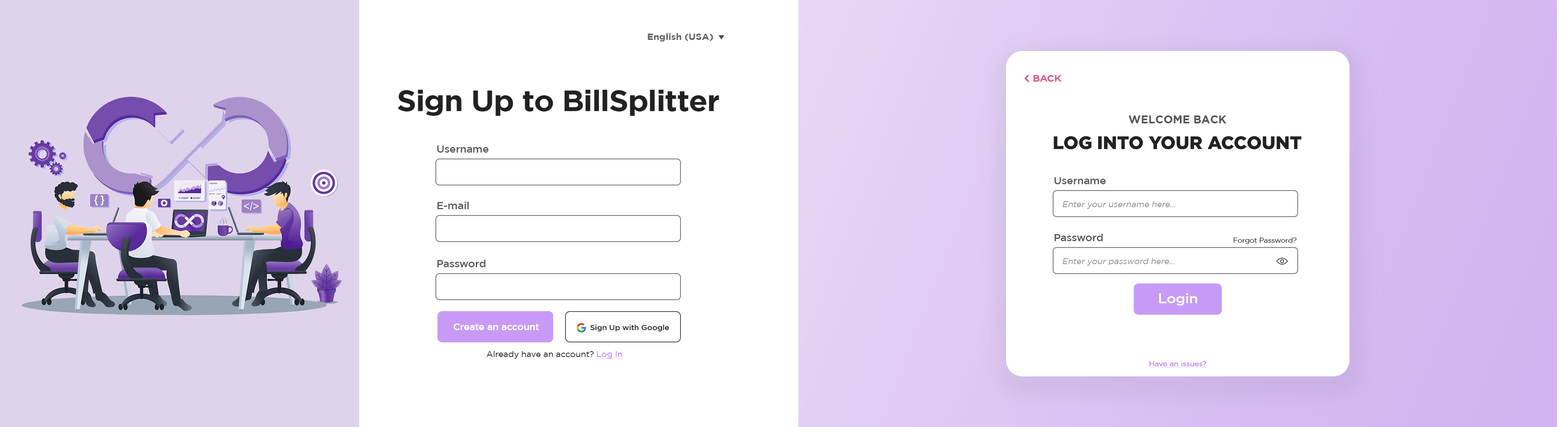
<style>
.page{position:relative;width:1568px;height:427px;background:#ffffff}
.page>*{position:absolute;margin:0}
.t1{font:9.1px "Gotham-Bold";letter-spacing:-0.01em;color:#656565;scale:1.05 1}
.t2{font:9.1px "Gotham-Bold";letter-spacing:-0.01em;color:#656565;text-transform:uppercase;scale:1.05 1}
.t3{font:9.2px "Gotham-Medium";letter-spacing:-0.025em;color:#d55c92;font-weight:bold;scale:1.05 1}
.t4{font:29.3px "Gotham-Bold";letter-spacing:-0.025em;color:#222222;scale:1.05 1}
.t5{font:11.1px "Gotham-Bold";color:#555555}
.t6{font:18.1px "Gotham-Black";color:#222222}
.t7{font:10.3px "Gotham-Medium";letter-spacing:-0.025em;color:#585858;scale:1.05 1}
.t8{font:8.4px "Gotham-Book";letter-spacing:-0.025em;color:#919191;font-style:italic;scale:1.05 1}
.t9{font:7.1px "Gotham-Book";letter-spacing:-0.025em;color:#000000;scale:1.05 1}
.t10{font:13.9px "Gotham-Medium";letter-spacing:-0.025em;color:#ffffff;scale:1.05 1}
.t11{font:9.4px "Gotham-Medium";letter-spacing:-0.025em;color:#ffffff;scale:1.05 1}
.t12{font:7.6px "Gotham-Medium";letter-spacing:-0.025em;color:#212121;scale:1.05 1}
.t13{font:8.4px "Gotham-Book";letter-spacing:-0.025em;color:#222222;scale:1.05 1}
.t14{font:8.4px "Gotham-Book";letter-spacing:-0.025em;color:#ba7ff6;text-decoration:underline;scale:1.05 1}
.t15{font:7.1px "Gotham-Book";letter-spacing:-0.025em;color:#ba7ff6;font-weight:bold;text-decoration:underline;scale:1.05 1}
</style>
<div class="page">
<p class="t1" style="left:648px;top:33px;width:65px;height:8px">English<span class="t2"> (USA)</span></p>
<p class="t3" style="left:1033px;top:75px;width:28px;height:7px">BACK</p>
<p class="t4" style="left:398px;top:90px;width:321px;height:26px">Sign Up to BillSplitter</p>
<p class="t5" style="left:1129px;top:115px;width:98px;height:8px">WELCOME BACK</p>
<p class="t6" style="left:1054px;top:136px;width:248px;height:13px">LOG INTO YOUR ACCOUNT</p>
<p class="t7" style="left:437px;top:145px;width:52px;height:8px">Username</p>
<p class="t7" style="left:1054px;top:177px;width:52px;height:7px">Username</p>
<p class="t7" style="left:437px;top:202px;width:32px;height:7px">E-mail</p>
<p class="t8" style="left:1063px;top:201px;width:112px;height:8px">Enter your username here...</p>
<p class="t7" style="left:1054px;top:234px;width:49px;height:7px">Password</p>
<p class="t9" style="left:1234px;top:237px;width:63px;height:7px">Forgot Password?</p>
<p class="t7" style="left:437px;top:260px;width:49px;height:7px">Password</p>
<p class="t8" style="left:1063px;top:258px;width:111px;height:8px">Enter your password here...</p>
<p class="t10" style="left:1159px;top:293px;width:38px;height:12px">Login</p>
<p class="t11" style="left:454px;top:323px;width:85px;height:7px">Create an account</p>
<p class="t12" style="left:590px;top:324px;width:79px;height:7px">Sign Up with Google</p>
<p class="t13" style="left:486px;top:351px;width:137px;height:7px">Already have an account? <span class="t14">Log In</span></p>
<p class="t15" style="left:1149px;top:361px;width:57px;height:7px">Have an issues?</p>
</div>
